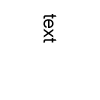
<style>
.page{position:relative;width:100px;height:100px;background:#ffffff}
.page>*{position:absolute;margin:0}
.t1{font:18px "ArialMT";color:#000000}
</style>
<div class="page">
<p class="t1" style="left:43px;top:14px;width:14px;height:29px">text</p>
</div>
